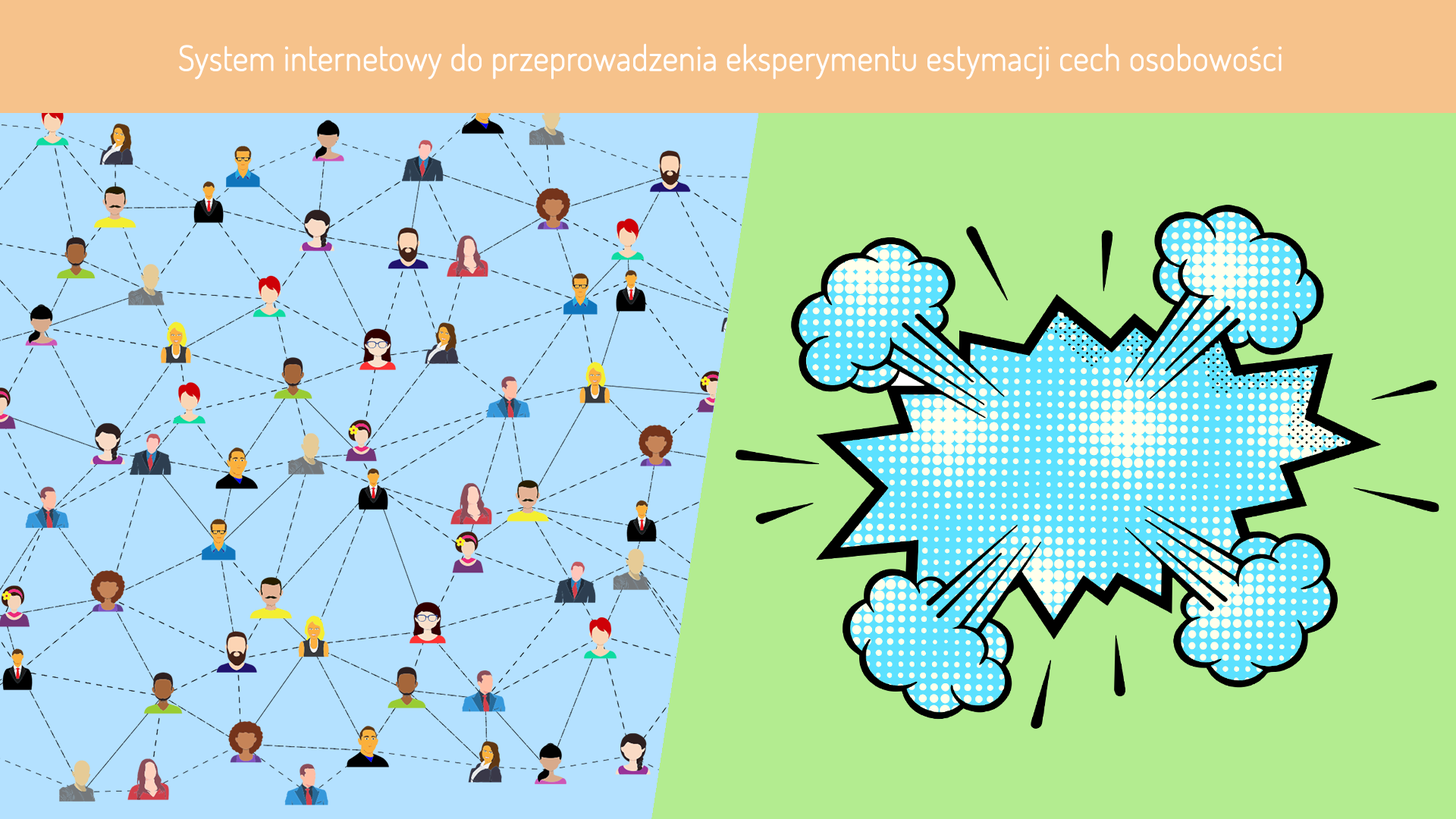
<style>
.page{position:relative;width:1456px;height:819px;background:#b4e1ff}
.page>*{position:absolute;margin:0}
.t1{font:34.1px "Dosis-ExtraLight";color:#ffffff;font-weight:bold}
</style>
<div class="page">
<p class="t1" style="left:179px;top:43px;width:1103px;height:37px">System internetowy do przeprowadzenia eksperymentu estymacji cech osobowości</p>
</div>
